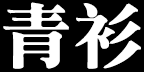
<style>
.page{position:relative;width:144px;height:72px;background:#000000}
.page>*{position:absolute;margin:0}
.t1{font:72px "HanWangWCL02";color:#ffffff}
</style>
<div class="page">
<p class="t1" style="left:3px;top:2px;width:138px;height:67px">青衫</p>
</div>
